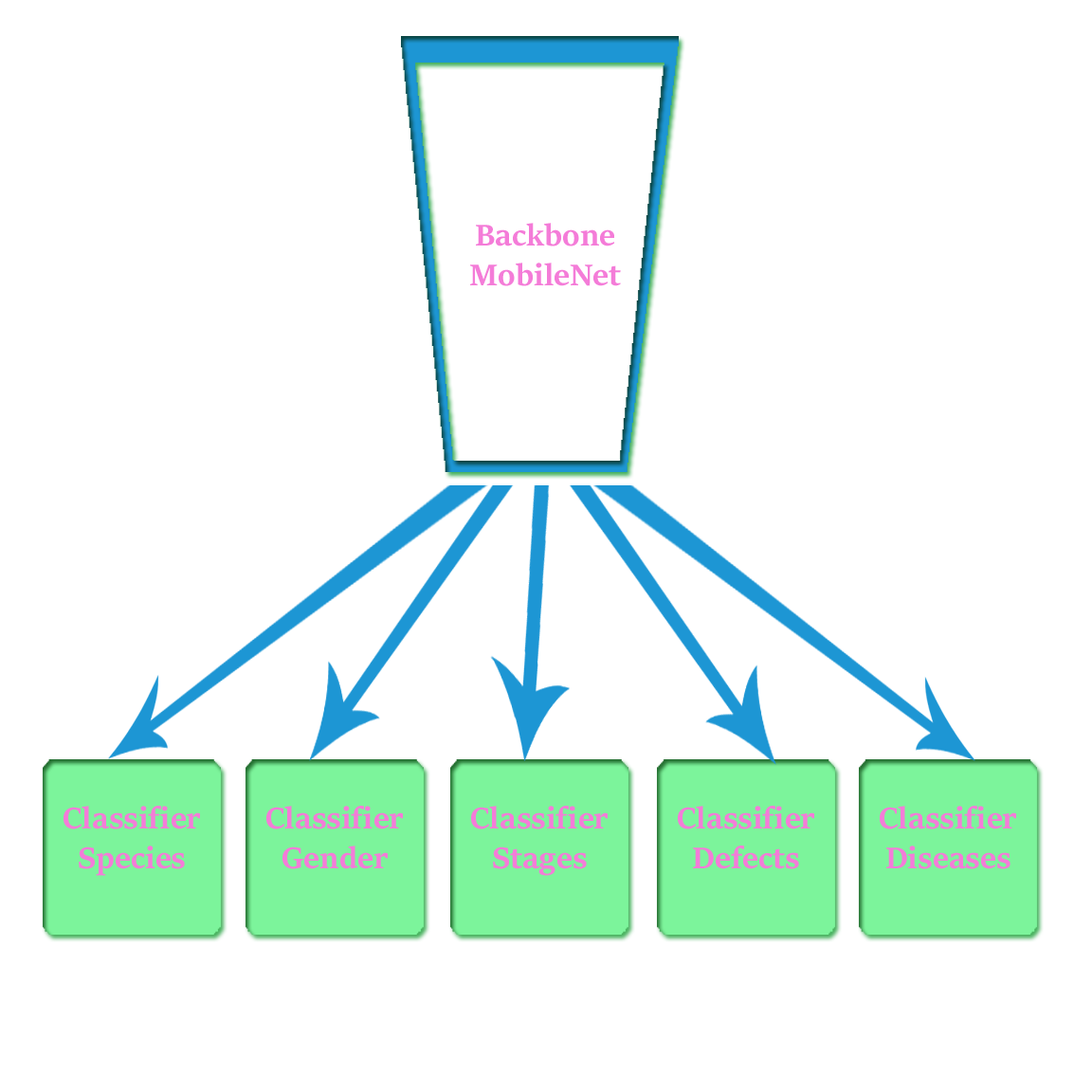
<style>
.page{position:relative;width:1092px;height:1092px;background:#ffffff}
.page>*{position:absolute;margin:0}
.t1{font:33.2px "SitkaHeading-Bold";color:#f47cd8}
</style>
<div class="page">
<p class="t1" style="left:470px;top:223px;width:151px;height:63px;text-align:center">Backbone<br>MobileNet</p>
<p class="t1" style="left:64px;top:806px;width:136px;height:70px;text-align:center">Classifier<br>Species</p>
<p class="t1" style="left:266px;top:806px;width:137px;height:63px;text-align:center">Classifier<br>Gender</p>
<p class="t1" style="left:471px;top:806px;width:137px;height:70px;text-align:center">Classifier<br>Stages</p>
<p class="t1" style="left:678px;top:806px;width:136px;height:63px;text-align:center">Classifier<br>Defects</p>
<p class="t1" style="left:880px;top:806px;width:136px;height:63px;text-align:center">Classifier<br>Diseases</p>
</div>
